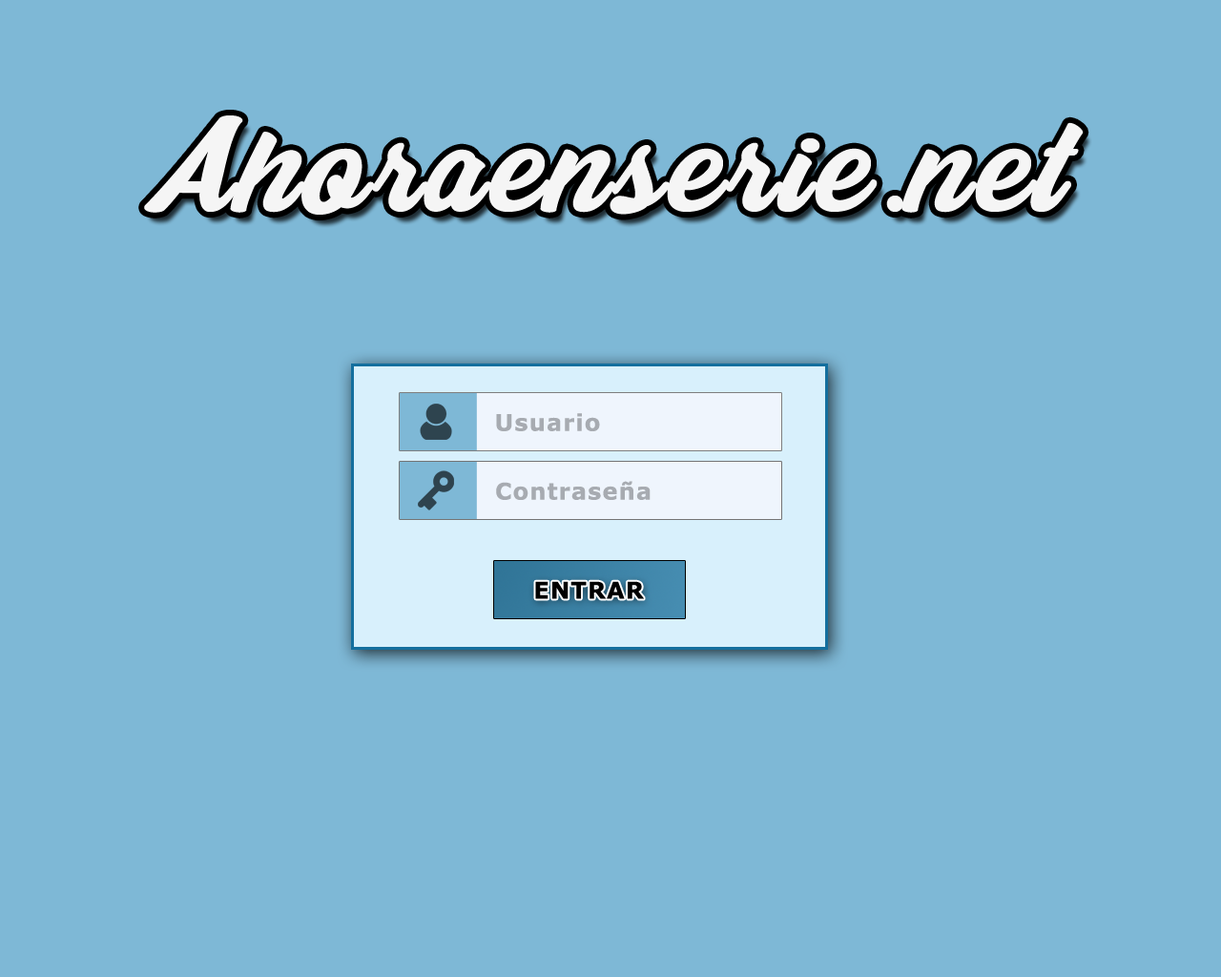
<style>
.page{position:relative;width:1221px;height:977px;background:#7eb8d6}
.page>*{position:absolute;margin:0}
.t1{font:137.3px "SunsetCloudsPersonalUse";letter-spacing:0.05em;color:#f5f5f5}
.t2{font:22.9px "Verdana-Bold";letter-spacing:0.05em;color:#a7abb1}
.t3{font:22.9px "Verdana-Bold";letter-spacing:0.05em;color:#000000}
</style>
<div class="page">
<p class="t1" style="left:144px;top:115px;width:940px;height:100px">Ahoraenserie.net</p>
<p class="t2" style="left:496px;top:413px;width:104px;height:18px">Usuario</p>
<p class="t2" style="left:496px;top:481px;width:154px;height:19px">Contraseña</p>
<p class="t3" style="left:535px;top:581px;width:109px;height:18px">ENTRAR</p>
</div>
